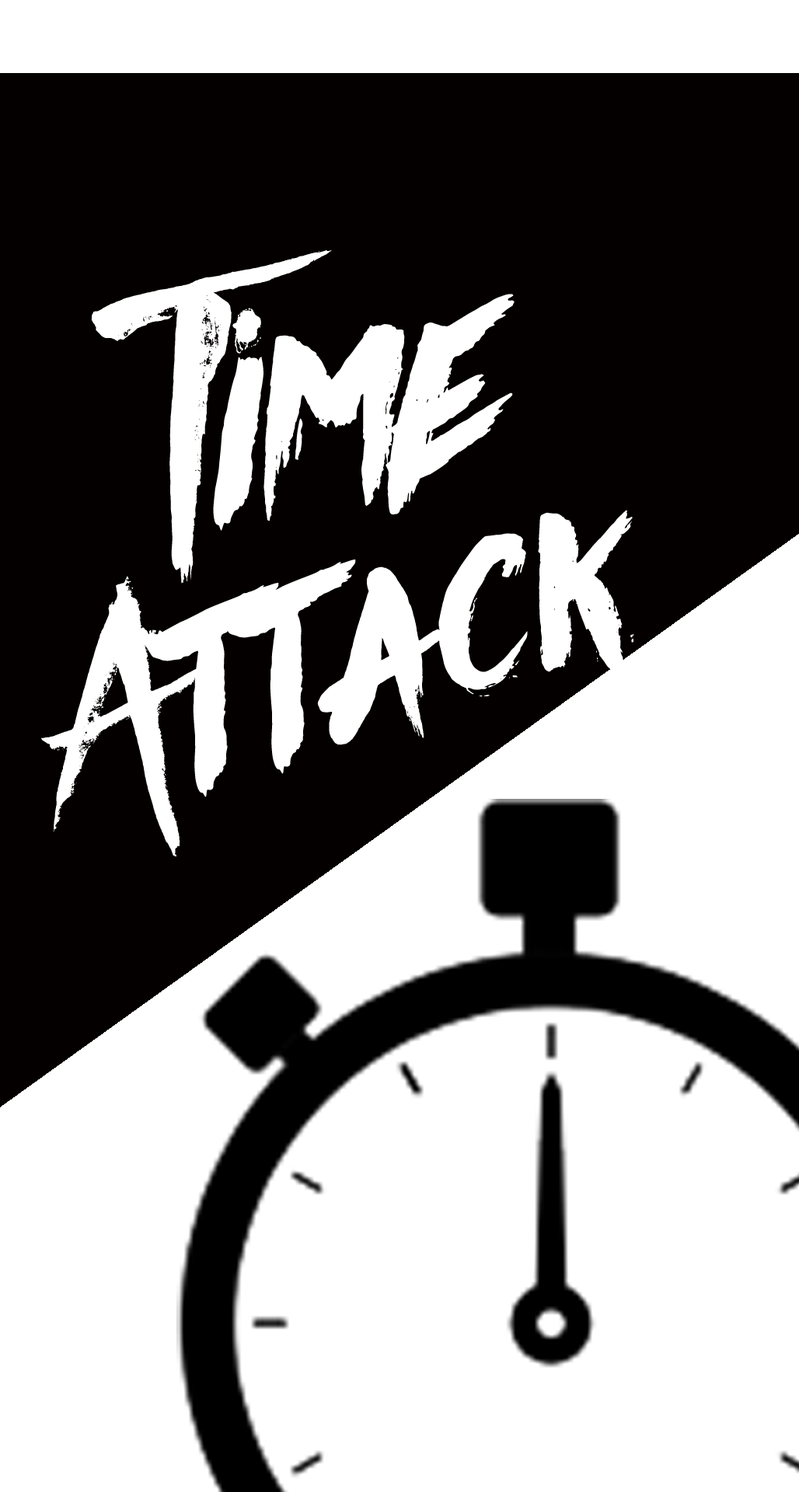
<style>
.page{position:relative;width:799px;height:1492px;background:#ffffff}
.page>*{position:absolute;margin:0}
.t1{font:344.6px "Againts";color:#ffffff;scale:0.95 1}
.t2{font:282.2px "Againts";color:#ffffff}
</style>
<div class="page">
<p class="t1" style="left:91px;top:250px;width:424px;height:334px;rotate:-8deg">Time</p>
<p class="t2" style="left:41px;top:510px;width:593px;height:347px;rotate:-17deg">Attack</p>
</div>
